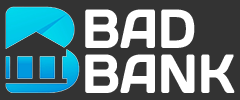
<style>
.page{position:relative;width:240px;height:100px;background:#333333}
.page>*{position:absolute;margin:0}
.t1{font:55px "DaysOne-Regular";color:#ffffff;scale:0.83 1}
</style>
<div class="page">
<p class="t1" style="left:85px;top:9px;width:110px;height:39px">BAD</p>
<p class="t1" style="left:85px;top:54px;width:150px;height:39px">BANK</p>
</div>
